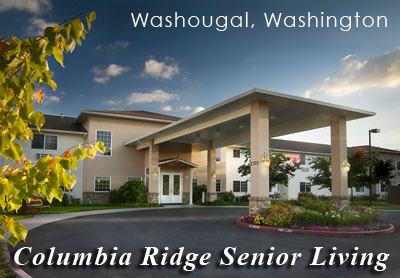
<style>
.page{position:relative;width:400px;height:278px}
.page>*{position:absolute;margin:0}
.t1{font:20.4px "CenturyGothic";letter-spacing:0.05em;color:#ffffff}
.t2{font:27px "TimesNewRomanPS-BoldItalicMT";letter-spacing:0.05em;color:#ffffff}
</style>
<div class="page">
<p class="t1" style="left:131px;top:12px;width:256px;height:19px">Washougal, Washington</p>
<p class="t2" style="left:14px;top:247px;width:376px;height:24px">Columbia Ridge Senior Living</p>
</div>
